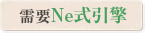
<style>
.page{position:relative;width:145px;height:33px;background:#f2e4d9}
.page>*{position:absolute;margin:0}
.t1{font:18px "RyuminPr6N-ExBold";color:#43a15f}
.t2{font:16px "RyuminPr6N-ExBold";color:#4b4742}
</style>
<div class="page">
<p class="t1" style="left:19px;top:6px;width:108px;height:18px"><span class="t2">需要</span>Ne式引擎</p>
</div>
